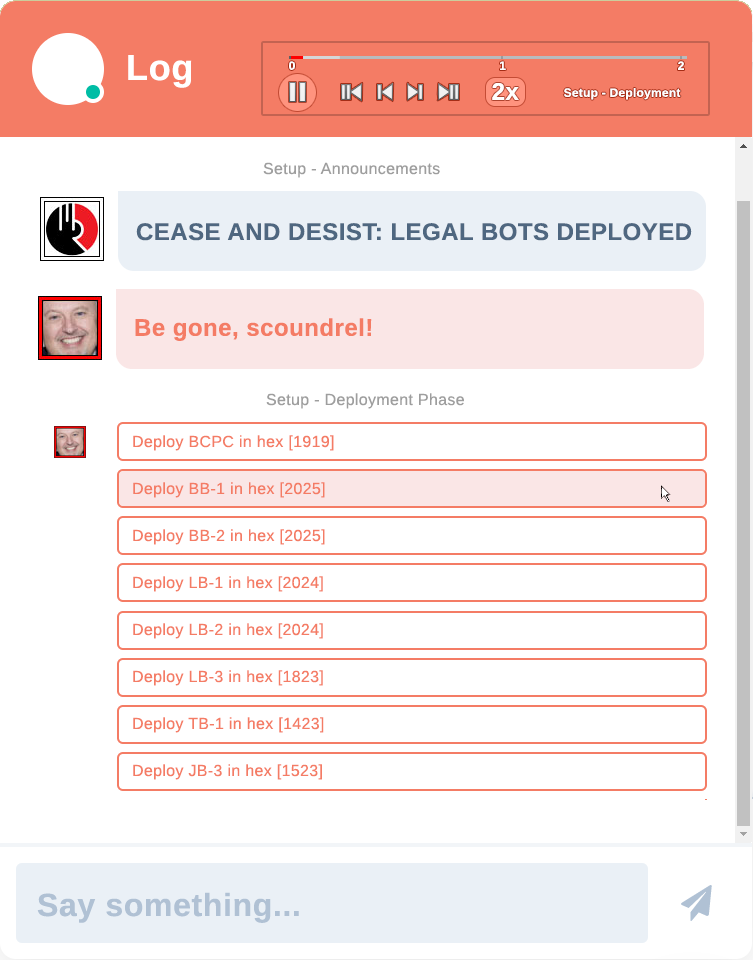
<style>
.page{position:relative;width:753px;height:960px;background:#ffffff}
.page>*{position:absolute;margin:0}
.t1{font:36px "LiberationSans-Bold";letter-spacing:0.02em;color:#ffffff}
.t2{font:12px "LiberationSans-Bold";letter-spacing:0.02em;color:#ffffff}
.t3{font:24px "LiberationSans-Bold";letter-spacing:0.02em;color:#ffffff}
.t4{font:16px "LiberationSans";letter-spacing:0.02em;color:#9e9e9e}
.t5{font:24px "LiberationSans-Bold";letter-spacing:0.02em;color:#4f6780}
.t6{font:24px "LiberationSans-Bold";letter-spacing:0.02em;color:#f47c65}
.t7{font:16px/47px "LiberationSans";letter-spacing:0.02em;color:#f47c65}
.t8{font:32px "LiberationSans-Bold";letter-spacing:0.02em;color:#b0c1d4}
</style>
<div class="page">
<p class="t1" style="left:128px;top:55px;width:64px;height:33px">Log</p>
<p class="t2" style="left:289px;top:61px;width:395px;height:9px">0                                                         1                                                2</p>
<p class="t3" style="left:492px;top:83px;width:27px;height:17px">2x</p>
<p class="t2" style="left:563px;top:88px;width:118px;height:12px">Setup - Deployment</p>
<p class="t4" style="left:263px;top:162px;width:177px;height:16px">Setup - Announcements</p>
<p class="t5" style="left:136px;top:223px;width:556px;height:18px">CEASE AND DESIST: LEGAL BOTS DEPLOYED</p>
<p class="t6" style="left:135px;top:318px;width:237px;height:23px">Be gone, scoundrel!</p>
<p class="t4" style="left:266px;top:393px;width:198px;height:16px">Setup - Deployment Phase</p>
<p class="t7" style="left:133px;top:435px;width:201px;height:345px">Deploy BCPC in hex [1919]<br>Deploy BB-1 in hex [2025]<br>Deploy BB-2 in hex [2025]<br>Deploy LB-1 in hex [2024]<br>Deploy LB-2 in hex [2024]<br>Deploy LB-3 in hex [1823]<br>Deploy TB-1 in hex [1423]<br>Deploy JB-3 in hex [1523]</p>
<p class="t8" style="left:37px;top:892px;width:262px;height:31px">Say something...</p>
</div>
